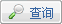
<style>
.page{position:relative;width:62px;height:24px;background:#f4f4f4}
.page>*{position:absolute;margin:0}
.t1{font:12px "SimSun";letter-spacing:0.05em;color:#3967a3}
</style>
<div class="page">
<p class="t1" style="left:30px;top:7px;width:23px;height:12px">查询</p>
</div>
